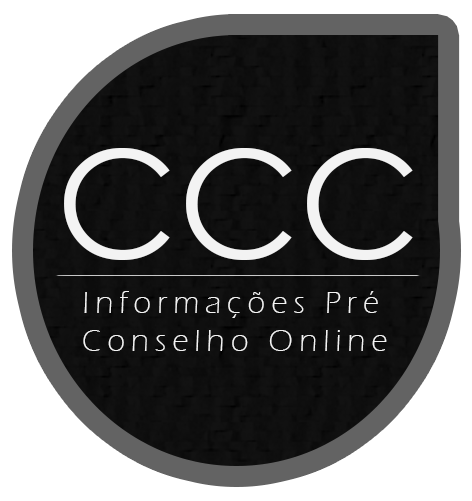
<style>
.page{position:relative;width:472px;height:501px;background:#ffffff}
.page>*{position:absolute;margin:0}
.t1{font:150.3px "CenturyGothic";color:#f3f3f3}
.t2{font:31.5px "ErasITC-Light";letter-spacing:0.2em;color:#f3f3f3}
</style>
<div class="page">
<p class="t1" style="left:64px;top:148px;width:349px;height:112px">CCC</p>
<p class="t2" style="left:83px;top:291px;width:304px;height:60px;text-align:center">Informações Pré <br>Conselho Online</p>
</div>
